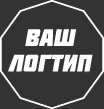
<style>
.page{position:relative;width:104px;height:109px;background:#333333}
.page>*{position:absolute;margin:0}
.t1{font:24px/24px "Molot";color:#ffffff;font-style:italic}
</style>
<div class="page">
<p class="t1" style="left:8px;top:29px;width:85px;height:43px;text-align:center">ваш<br>логтип</p>
</div>
